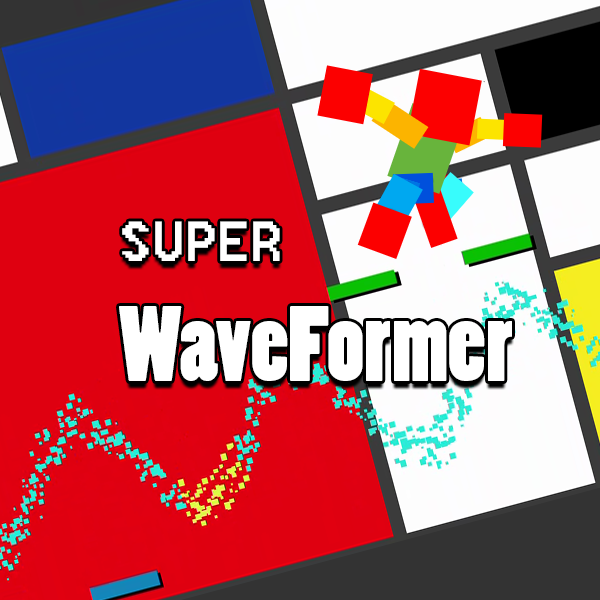
<style>
.page{position:relative;width:600px;height:600px;background:#df0010}
.page>*{position:absolute;margin:0}
.t1{font:100px "PoplarStd";color:#ffffff}
.t2{font:70px "8514oem";color:#ffffff}
</style>
<div class="page">
<p class="t1" style="left:119px;top:221px;width:393px;height:160px"><span class="t2">SUPER<br></span>WaveFormer</p>
</div>
